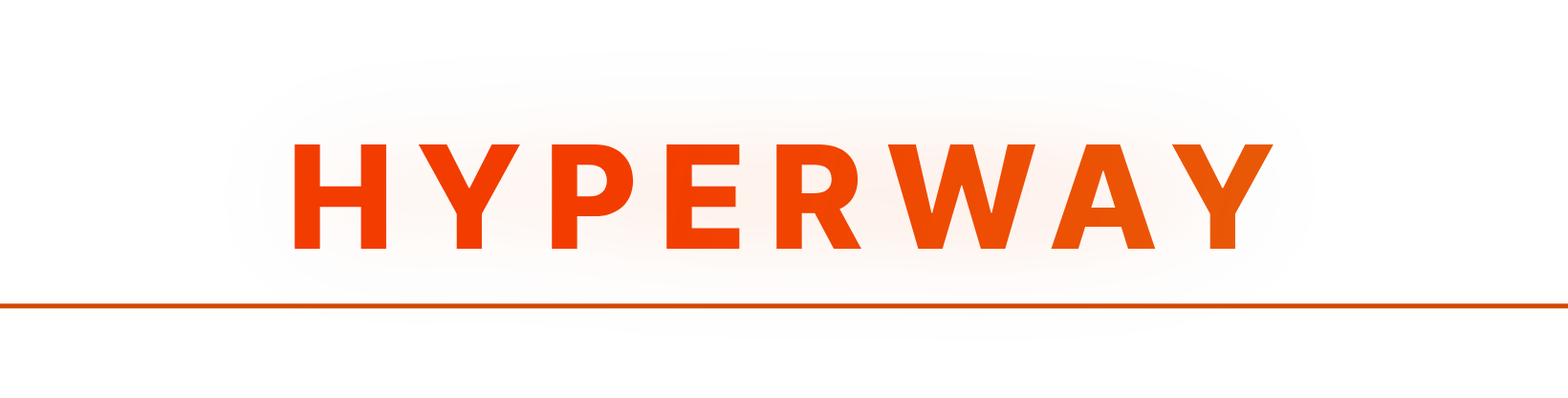
<style>
.page{position:relative;width:1568px;height:398px;background:#ffffff}
.page>*{position:absolute;margin:0}
.t1{font:143.4px "Inter-ExtraBold";letter-spacing:0.15em;color:#f14401;text-transform:uppercase}
</style>
<div class="page">
<p class="t1" style="left:294px;top:143px;width:980px;height:106px">Hyperway</p>
</div>
